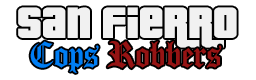
<style>
.page{position:relative;width:256px;height:80px;background:#ffffff}
.page>*{position:absolute;margin:0}
.t1{font:60px "Pricedown";color:#f1f1f1}
.t2{font:36px "Diploma";color:#961414}
.t3{font:36px "Diploma";color:#007ef3}
</style>
<div class="page">
<p class="t1" style="left:18px;top:7px;width:219px;height:41px">SAN FIERRO</p>
<p class="t2" style="left:30px;top:41px;width:192px;height:32px"><span class="t3">Cops </span>Robbers</p>
</div>
